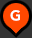
<style>
.page{position:relative;width:32px;height:38px;background:#ff4800}
.page>*{position:absolute;margin:0}
.t1{font:14px "Avenir-Heavy";color:#ffffff}
</style>
<div class="page">
<p class="t1" style="left:10px;top:10px;width:10px;height:11px">G</p>
</div>
